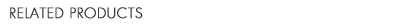
<style>
.page{position:relative;width:400px;height:24px;background:#ffffff}
.page>*{position:absolute;margin:0}
.t1{font:14px "FuturaLT-Light";letter-spacing:0.025em;color:#363636;text-transform:uppercase;font-weight:bold}
</style>
<div class="page">
<p class="t1" style="left:10px;top:7px;width:133px;height:12px">RELATED products</p>
</div>
